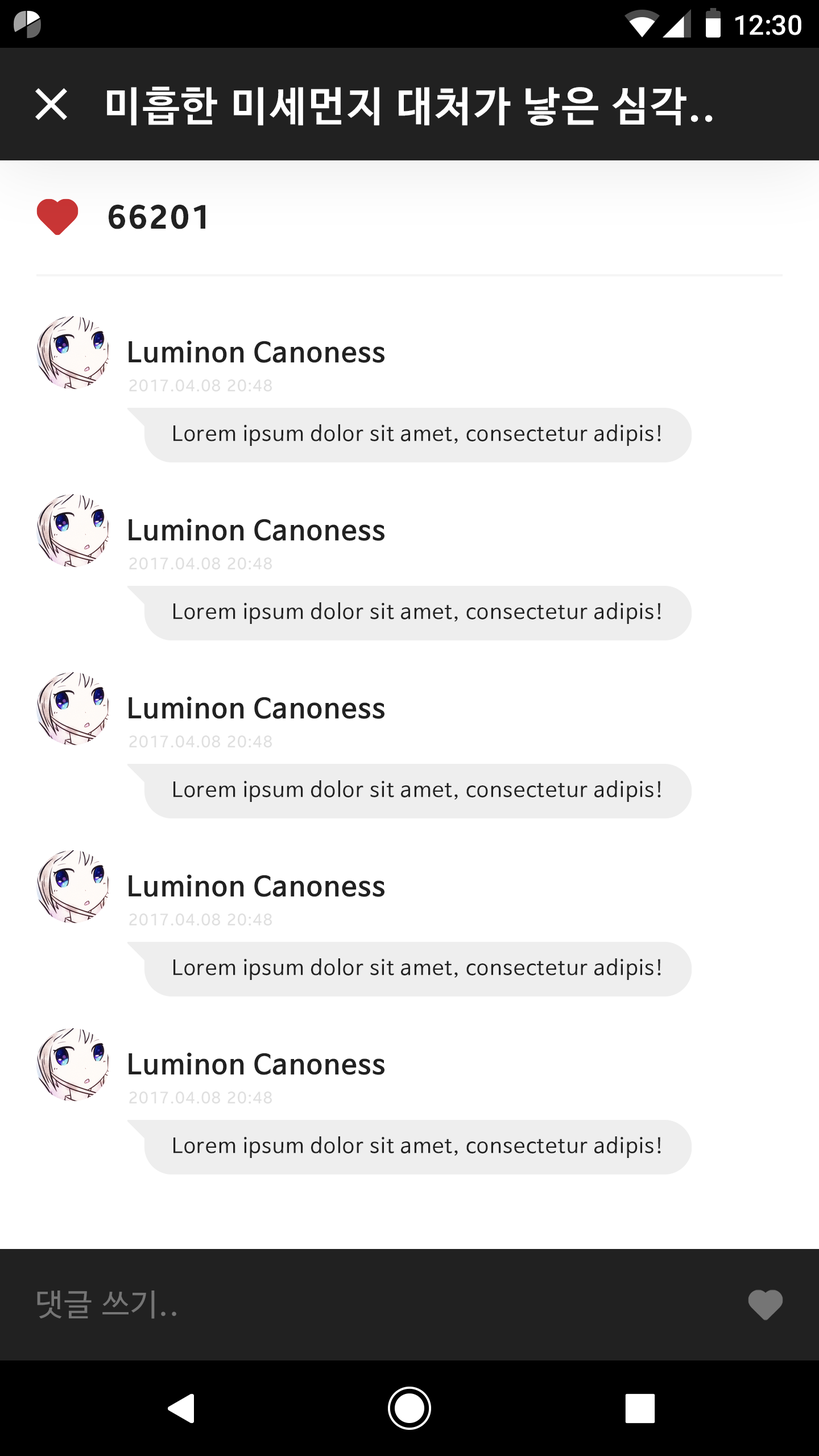
<style>
.page{position:relative;width:819px;height:1456px;background:#ffffff}
.page>*{position:absolute;margin:0}
.t1{font:27.3px "Roboto-Medium";color:#ffffff}
.t2{font:40.9px "NanumBarunGothicBold";letter-spacing:0.05em;color:#ffffff}
.t3{font:34.1px "BreezeSans-Bold";letter-spacing:0.05em;color:#212121}
.t4{font:27.3px "NanumBarunGothicBold";letter-spacing:0.05em;color:#212121}
.t5{font:17.1px "BreezeSans";letter-spacing:0.05em;color:#dfdfdf}
.t6{font:20.5px "NanumBarunGothic";letter-spacing:0.05em;color:#212121}
.t7{font:30.7px "NanumBarunGothic";letter-spacing:0.05em;color:#757575}
</style>
<div class="page">
<p class="t1" style="left:735px;top:15px;width:66px;height:20px">12:30</p>
<p class="t2" style="left:107px;top:86px;width:606px;height:40px">미흡한 미세먼지 대처가 낳은 심각..</p>
<p class="t3" style="left:109px;top:204px;width:96px;height:25px">66201</p>
<p class="t4" style="left:129px;top:340px;width:255px;height:23px">Luminon Canoness</p>
<p class="t5" style="left:129px;top:379px;width:143px;height:13px">2017.04.08 20:48</p>
<p class="t6" style="left:173px;top:424px;width:488px;height:22px">Lorem ipsum dolor sit amet, consectetur adipis!</p>
<p class="t4" style="left:129px;top:518px;width:255px;height:23px">Luminon Canoness</p>
<p class="t5" style="left:129px;top:557px;width:143px;height:13px">2017.04.08 20:48</p>
<p class="t6" style="left:173px;top:602px;width:488px;height:22px">Lorem ipsum dolor sit amet, consectetur adipis!</p>
<p class="t4" style="left:129px;top:696px;width:255px;height:23px">Luminon Canoness</p>
<p class="t5" style="left:129px;top:735px;width:143px;height:13px">2017.04.08 20:48</p>
<p class="t6" style="left:173px;top:780px;width:488px;height:22px">Lorem ipsum dolor sit amet, consectetur adipis!</p>
<p class="t4" style="left:129px;top:874px;width:255px;height:23px">Luminon Canoness</p>
<p class="t5" style="left:129px;top:913px;width:143px;height:13px">2017.04.08 20:48</p>
<p class="t6" style="left:173px;top:958px;width:488px;height:22px">Lorem ipsum dolor sit amet, consectetur adipis!</p>
<p class="t4" style="left:129px;top:1052px;width:255px;height:23px">Luminon Canoness</p>
<p class="t5" style="left:129px;top:1091px;width:143px;height:13px">2017.04.08 20:48</p>
<p class="t6" style="left:173px;top:1136px;width:488px;height:22px">Lorem ipsum dolor sit amet, consectetur adipis!</p>
<p class="t7" style="left:37px;top:1290px;width:139px;height:29px">댓글 쓰기..</p>
</div>
